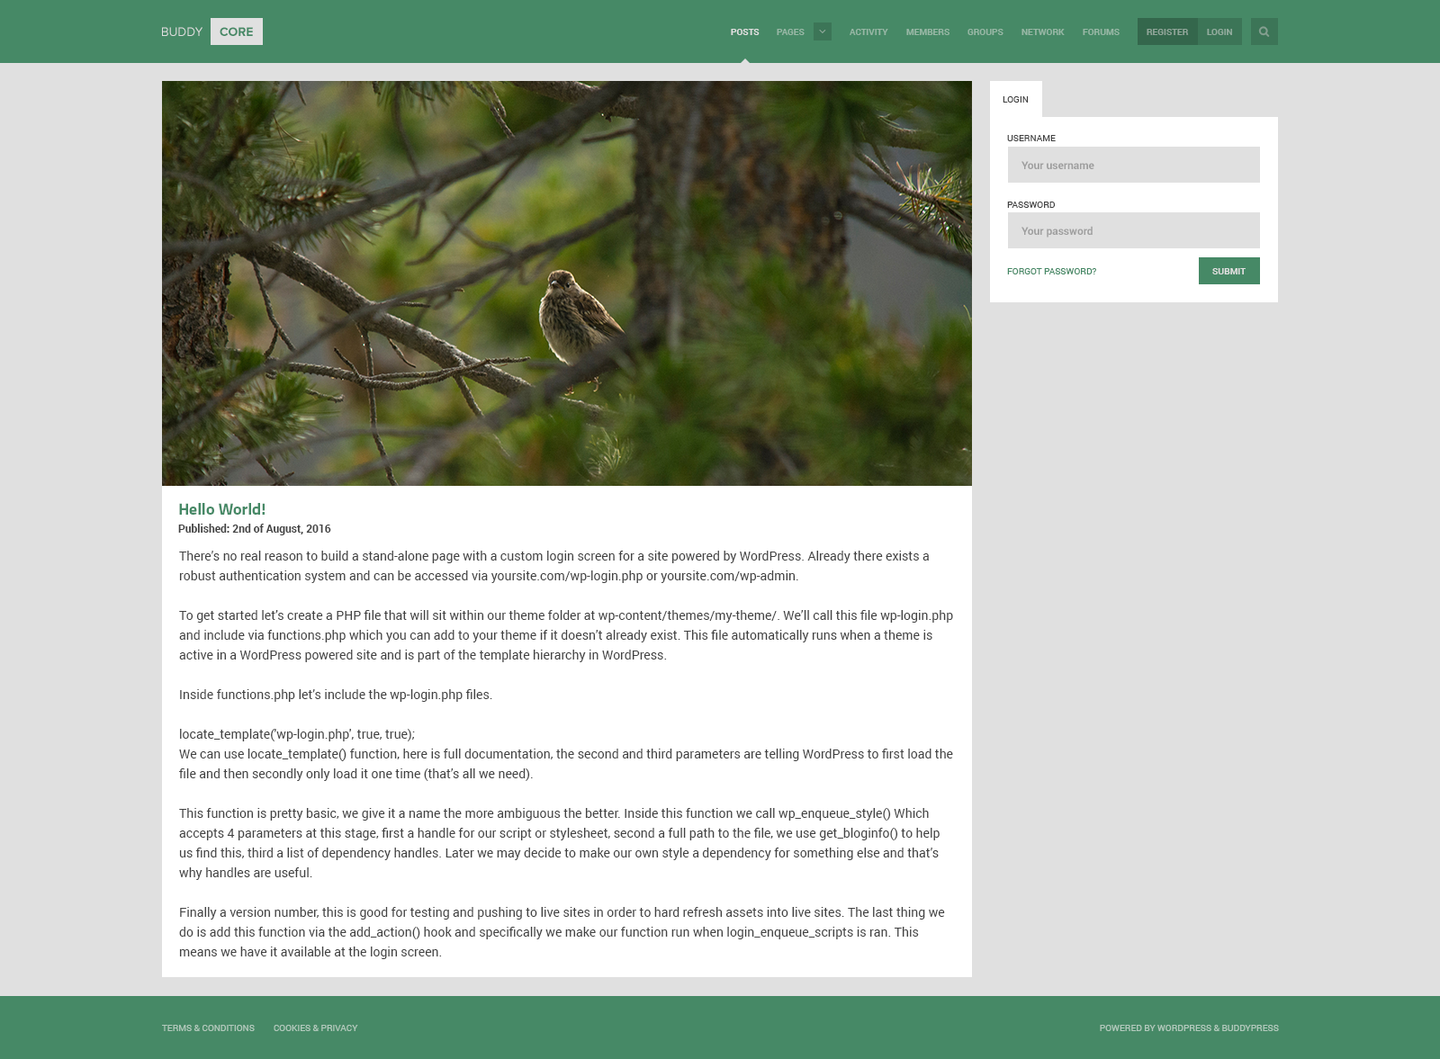
<style>
.page{position:relative;width:1440px;height:1059px;background:#e0e0e0}
.page>*{position:absolute;margin:0}
.t1{font:12.6px "ProximaNova-Regular";color:#e0e0e0;text-transform:uppercase}
.t2{font:12.6px "ProximaNova-Bold";color:#468966;text-transform:uppercase}
.t3{font:9px "Roboto-Bold";color:#e0e0e0;text-transform:uppercase}
.t4{font:9px "Roboto-Bold";color:#97b7a5;text-transform:uppercase}
.t5{font:9px "Roboto-Bold";color:#90a699;text-transform:uppercase}
.t6{font:9px "Roboto-Bold";color:#93ad9e;text-transform:uppercase}
.t7{font:9px "Roboto-Regular";color:#424242;text-transform:uppercase}
.t8{font:10.8px "Roboto-Bold";color:#9e9e9e}
.t9{font:9px "Roboto-Regular";color:#468966;text-transform:uppercase}
.t10{font:16.2px "Titillium-Bold";color:#468966}
.t11{font:10.8px "Roboto-Bold";color:#424242}
.t12{font:12.6px/19.8px "Roboto-Regular";color:#424242}
.t13{font:9px "Roboto-Regular";color:#b2cabd;text-transform:uppercase}
</style>
<div class="page">
<p class="t1" style="left:162px;top:27px;width:40px;height:9px">Buddy</p>
<p class="t2" style="left:220px;top:27px;width:33px;height:9px">Core</p>
<p class="t3" style="left:731px;top:29px;width:29px;height:6px">Posts</p>
<p class="t4" style="left:777px;top:29px;width:28px;height:6px">Pages</p>
<p class="t4" style="left:850px;top:29px;width:38px;height:6px">Activity</p>
<p class="t4" style="left:906px;top:29px;width:44px;height:6px">Members</p>
<p class="t4" style="left:968px;top:29px;width:36px;height:6px">Groups</p>
<p class="t4" style="left:1022px;top:29px;width:43px;height:6px">Network</p>
<p class="t4" style="left:1083px;top:29px;width:37px;height:6px">Forums</p>
<p class="t5" style="left:1147px;top:29px;width:42px;height:6px">Register</p>
<p class="t6" style="left:1207px;top:29px;width:25px;height:6px">Login</p>
<p class="t7" style="left:1003px;top:96px;width:26px;height:7px">Login</p>
<p class="t7" style="left:1007px;top:135px;width:49px;height:6px">Username</p>
<p class="t8" style="left:1022px;top:161px;width:72px;height:8px">Your username</p>
<p class="t7" style="left:1007px;top:202px;width:48px;height:6px">Password</p>
<p class="t8" style="left:1022px;top:226px;width:71px;height:12px">Your password</p>
<p class="t9" style="left:1007px;top:268px;width:89px;height:6px">Forgot password?</p>
<p class="t3" style="left:1212px;top:268px;width:34px;height:6px">Submit</p>
<p class="t10" style="left:179px;top:503px;width:86px;height:12px">Hello World!</p>
<p class="t11" style="left:178px;top:524px;width:153px;height:12px">Published: 2nd of August, 2016</p>
<p class="t12" style="left:179px;top:551px;width:774px;height:408px">There’s no real reason to build a stand-alone page with a custom login screen for a site powered by WordPress. Already there exists a robust authentication system and can be accessed via yoursite.com/wp-login.php or yoursite.com/wp-admin.<br><br>To get started let’s create a PHP file that will sit within our theme folder at wp-content/themes/my-theme/. We’ll call this file wp-login.php and include via functions.php which you can add to your theme if it doesn’t already exist. This file automatically runs when a theme is active in a WordPress powered site and is part of the template hierarchy in WordPress.<br><br>Inside functions.php let’s include the wp-login.php files.<br><br>locate_template('wp-login.php', true, true);<br>We can use locate_template() function, here is full documentation, the second and third parameters are telling WordPress to first load the file and then secondly only load it one time (that’s all we need).<br><br>This function is pretty basic, we give it a name the more ambiguous the better. Inside this function we call wp_enqueue_style() Which accepts 4 parameters at this stage, first a handle for our script or stylesheet, second a full path to the file, we use get_bloginfo() to help us find this, third a list of dependency handles. Later we may decide to make our own style a dependency for something else and that’s why handles are useful. <br><br>Finally a version number, this is good for testing and pushing to live sites in order to hard refresh assets into live sites. The last thing we do is add this function via the add_action() hook and specifically we make our function run when login_enqueue_scripts is ran. This means we have it available at the login screen.</p>
<p class="t13" style="left:162px;top:1025px;width:93px;height:6px">Terms &amp; Conditions</p>
<p class="t13" style="left:274px;top:1025px;width:84px;height:6px">Cookies &amp; Privacy</p>
<p class="t13" style="left:1100px;top:1025px;width:179px;height:6px">Powered by WordPress &amp; BuddyPress</p>
</div>
